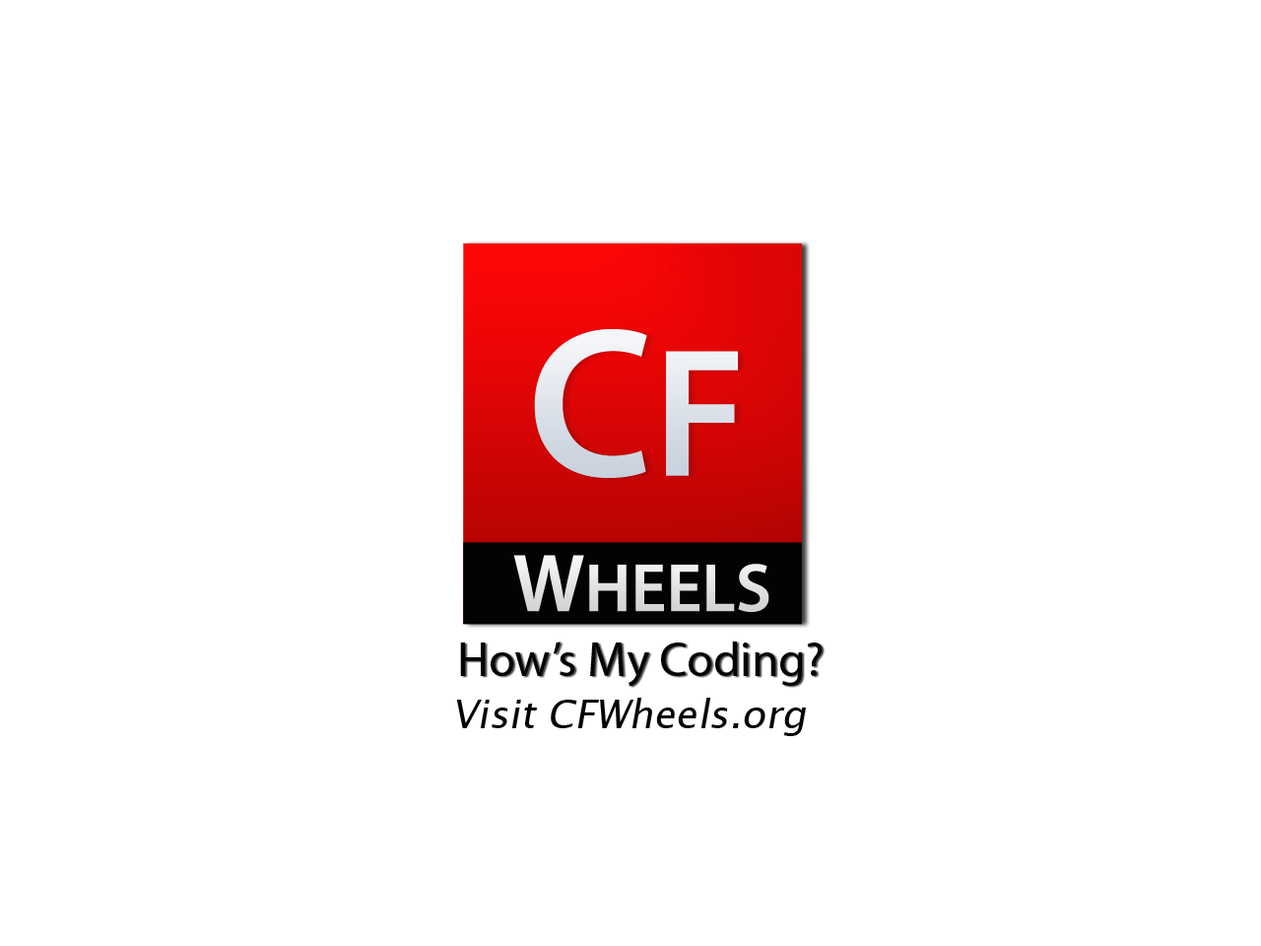
<style>
.page{position:relative;width:1261px;height:946px;background:#ffffff}
.page>*{position:absolute;margin:0}
.t1{font:213.6px "MyriadPro-Semibold";color:#dee3eb}
.t2{font:184px "MyriadPro-Semibold";color:#dee3eb}
.t3{font:68.8px "MyriadPro-Semibold";color:#e3e2e2}
.t4{font:82.6px "MyriadPro-Semibold";color:#e3e2e2}
.t5{font:48.2px "MyriadPro-Regular";color:#040404}
.t6{font:39.3px "LucidaSansUnicode";color:#040404;font-style:italic}
</style>
<div class="page">
<p class="t1" style="left:534px;top:329px;width:204px;height:149px">C<span class="t2">F</span></p>
<p class="t3" style="left:513px;top:555px;width:256px;height:57px"><span class="t4">W</span>HEELS</p>
<p class="t5" style="left:460px;top:641px;width:363px;height:46px">How’s My Coding?</p>
<p class="t6" style="left:456px;top:697px;width:350px;height:39px">Visit CFWheels.org</p>
</div>
